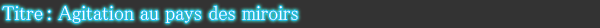
<style>
.page{position:relative;width:600px;height:28px;background:#333333}
.page>*{position:absolute;margin:0}
.t1{font:20px "MS-PMincho";color:#ffffff}
</style>
<div class="page">
<p class="t1" style="left:2px;top:5px;width:296px;height:18px">Titre : Agitation au pays des miroirs</p>
</div>
